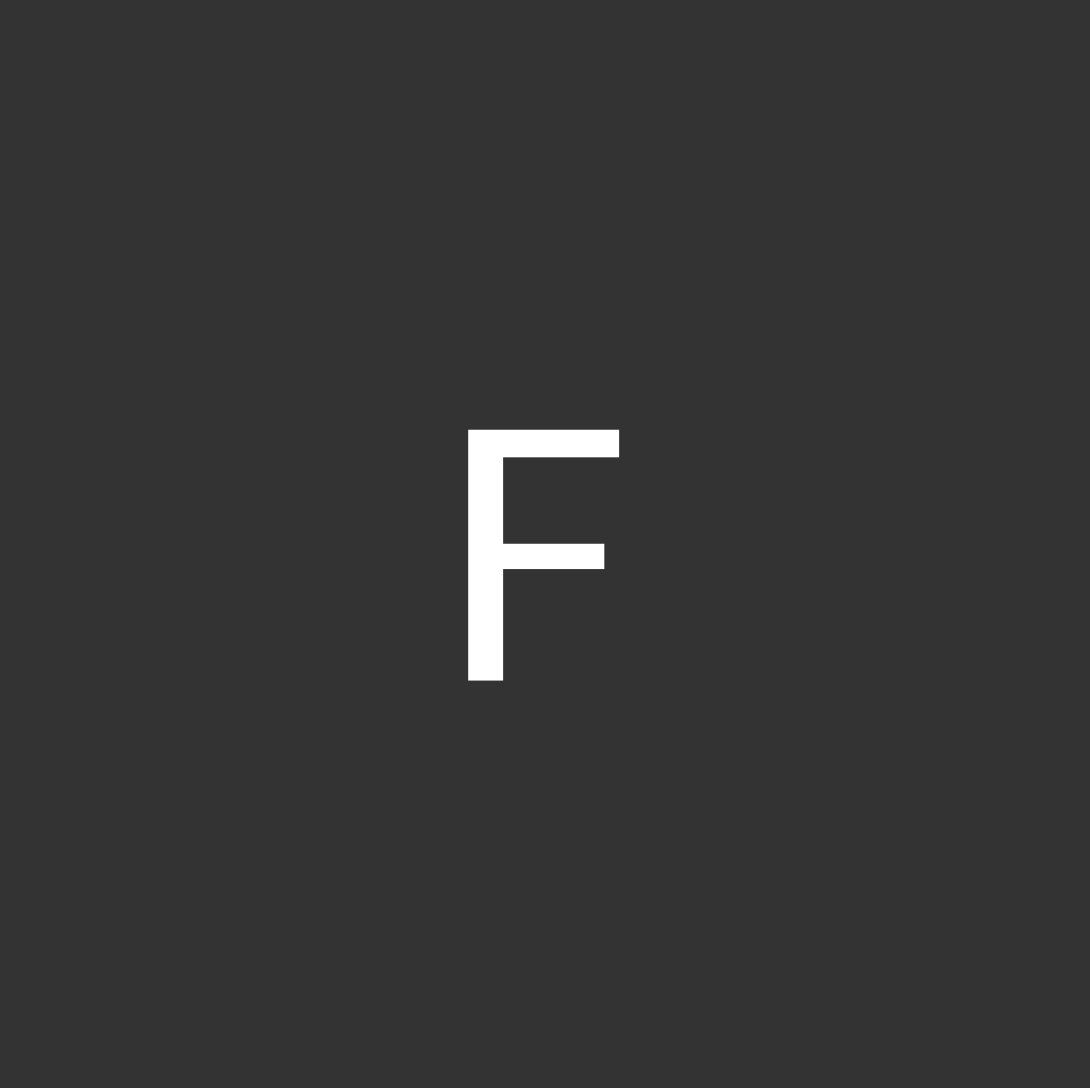
<style>
.page{position:relative;width:1090px;height:1088px;background:#333333}
.page>*{position:absolute;margin:0}
.t1{font:466.2px "AppleSymbols";letter-spacing:-0.04em;color:#ffffff;scale:1.06 1}
</style>
<div class="page">
<p class="t1" style="left:468px;top:429px;width:152px;height:252px">F</p>
</div>
